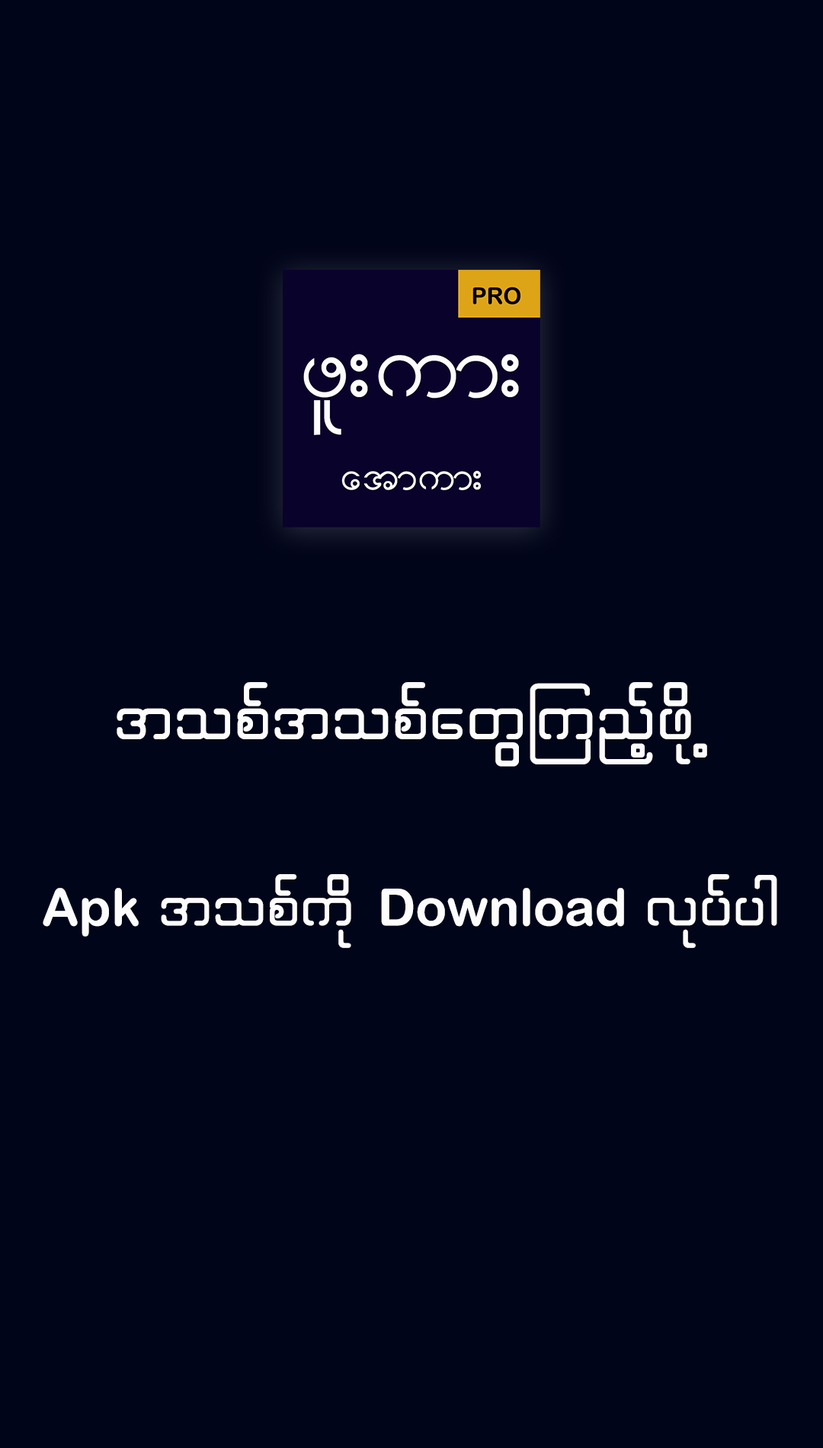
<style>
.page{position:relative;width:823px;height:1448px;background:#010519}
.page>*{position:absolute;margin:0}
.t1{font:82.6px "WinSittway";color:#fcfcfc}
.t2{font:51.4px "ArialRoundedMTBold";color:#fcfcfc}
.t3{font:74.3px "WinSittway";color:#fcfcfc}
</style>
<div class="page">
<p class="t1" style="left:117px;top:682px;width:590px;height:85px">topftopfawGMunfhzdk h</p>
<p class="t2" style="left:43px;top:874px;width:735px;height:74px">Apk <span class="t3">topfudk </span>Download <span class="t3">vkyfyg</span></p>
</div>
